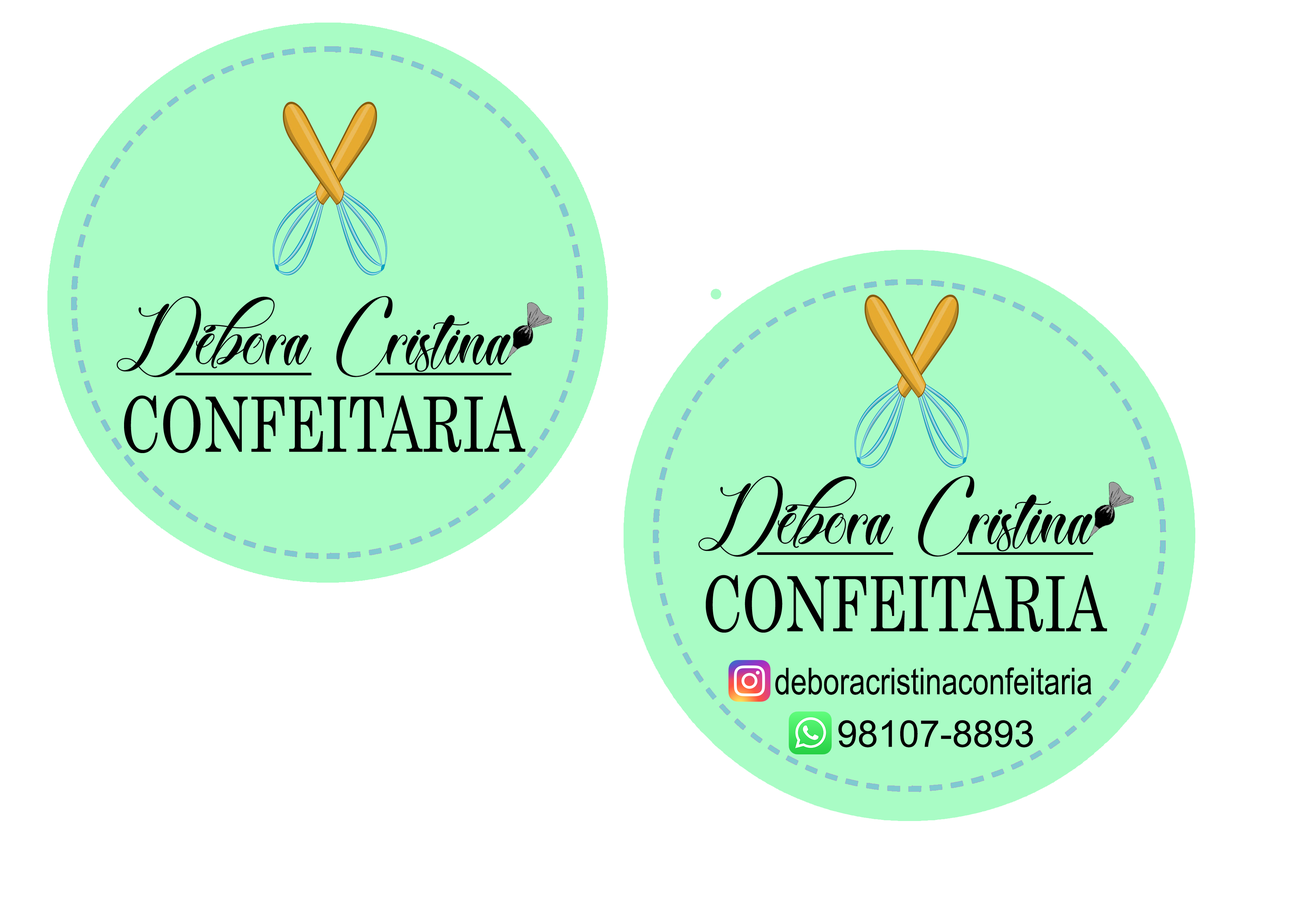
<style>
.page{position:relative;width:1299px;height:918px;background:#ffffff}
.page>*{position:absolute;margin:0}
.t1{font:76.2px "Century";color:#000000;scale:0.73 1}
.t2{font:37px "ArialMT";color:#000000;scale:0.79 1}
.t3{font:37px "ArialMT";color:#000000}
</style>
<div class="page">
<p class="t1" style="left:124px;top:395px;width:401px;height:58px">CONFEITARIA</p>
<p class="t1" style="left:706px;top:575px;width:401px;height:58px">CONFEITARIA</p>
<p class="t2" style="left:775px;top:667px;width:316px;height:28px">deboracristinaconfeitaria</p>
<p class="t3" style="left:838px;top:720px;width:195px;height:27px">98107-8893</p>
</div>
